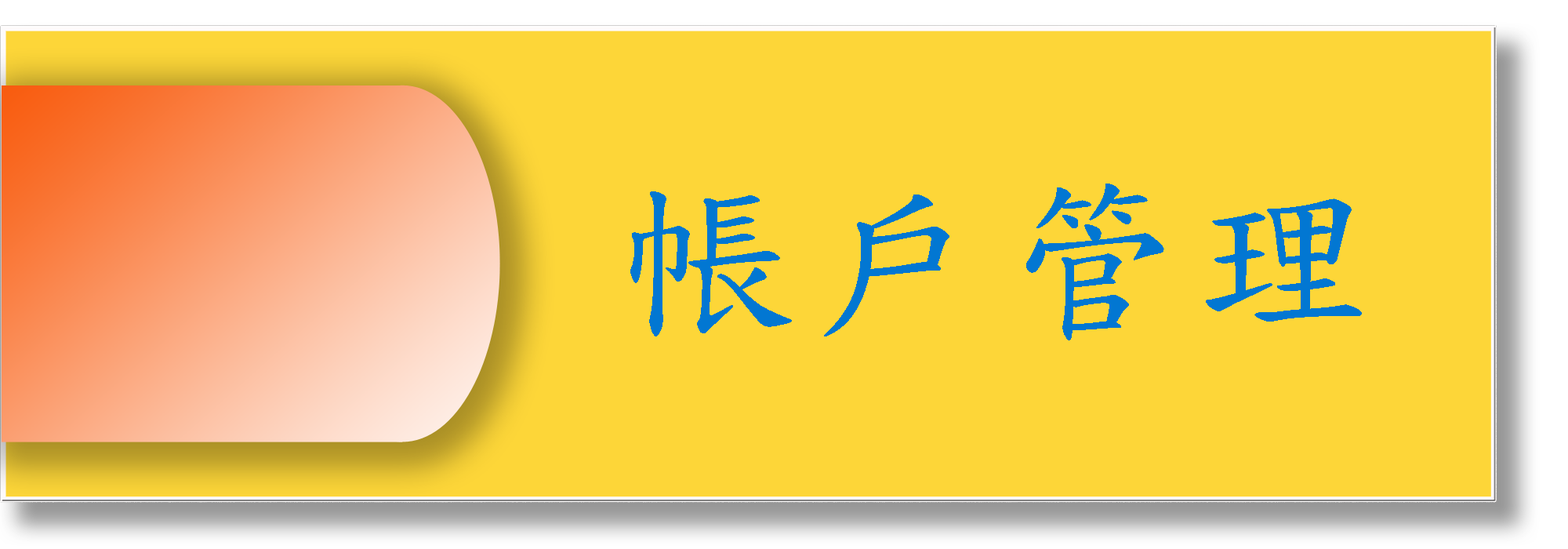
<style>
.page{position:relative;width:1568px;height:549px;background:#fdd638}
.page>*{position:absolute;margin:0}
.t1{font:175px "DFKaiShu-SB-Estd-BF";letter-spacing:0.08em;color:#0277d2}
</style>
<div class="page">
<p class="t1" style="left:630px;top:183px;width:732px;height:157px">帳戶管理</p>
</div>
